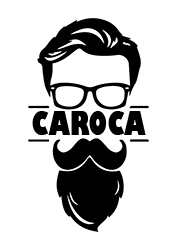
<style>
.page{position:relative;width:177px;height:250px;background:#ffffff}
.page>*{position:absolute;margin:0}
.t1{font:32px "GillSans-UltraBoldCondensed";color:#000000}
</style>
<div class="page">
<p class="t1" style="left:32px;top:111px;width:114px;height:24px">CAROCA</p>
</div>
